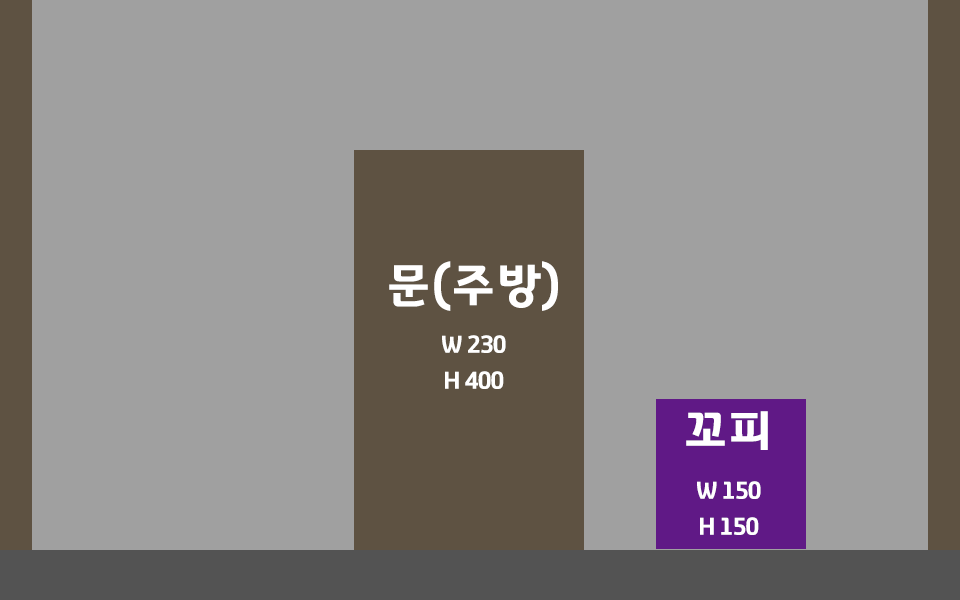
<style>
.page{position:relative;width:960px;height:600px;background:#a0a0a0}
.page>*{position:absolute;margin:0}
.t1{font:24px/36px "GyeonggiTitleV";letter-spacing:-0.05em;color:#ffffff}
.t2{font:48px/36px "GyeonggiTitleV";letter-spacing:-0.05em;color:#ffffff}
</style>
<div class="page">
<p class="t1" style="left:389px;top:261px;width:169px;height:128px;text-align:center"><span class="t2">문(주방)<br><br></span>W 230<br>H 400</p>
<p class="t1" style="left:686px;top:411px;width:82px;height:124px;text-align:center"><span class="t2">꼬피<br><br></span>W 150<br>H 150</p>
</div>
